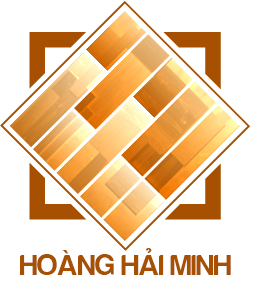
<style>
.page{position:relative;width:254px;height:291px;background:#ffffff}
.page>*{position:absolute;margin:0}
.t1{font:30px "FS-Harabara";color:#a75001}
</style>
<div class="page">
<p class="t1" style="left:20px;top:248px;width:211px;height:27px">HOÀNG HẢI MINH</p>
</div>
